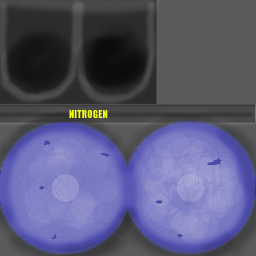
<style>
.page{position:relative;width:256px;height:256px}
.page>*{position:absolute;margin:0}
.t1{font:10px "Impact";color:#f3ff12}
</style>
<div class="page">
<p class="t1" style="left:69px;top:110px;width:39px;height:8px">NITROGEN</p>
</div>
